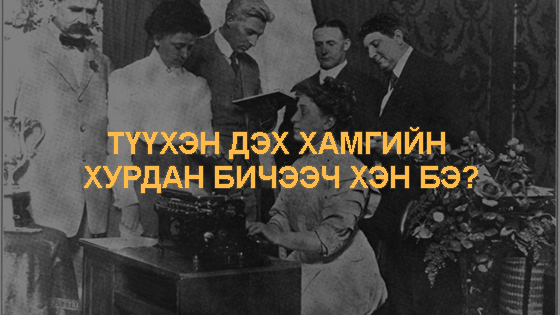
<style>
.page{position:relative;width:560px;height:315px}
.page>*{position:absolute;margin:0}
.t1{font:30px/34px "Arial-BoldMT";color:#fdbb49}
</style>
<div class="page">
<p class="t1" style="left:84px;top:127px;width:394px;height:66px;text-align:center">ТҮҮХЭН ДЭХ ХАМГИЙН <br>ХУРДАН БИЧЭЭЧ ХЭН БЭ?</p>
</div>
